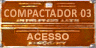
<style>
.page{position:relative;width:96px;height:48px}
.page>*{position:absolute;margin:0}
.t1{font:12px "Calibri-Bold";letter-spacing:0.04em;color:#f5b985;scale:0.88 1}
.t2{font:9.2px "Arial-BoldMT";letter-spacing:0.01em;color:#f5b985;scale:1.09 1}
</style>
<div class="page">
<p class="t1" style="left:4px;top:9px;width:87px;height:9px;opacity:0.85">COMPACTADOR 03</p>
<p class="t2" style="left:26px;top:33px;width:43px;height:7px">ACESSO</p>
</div>
